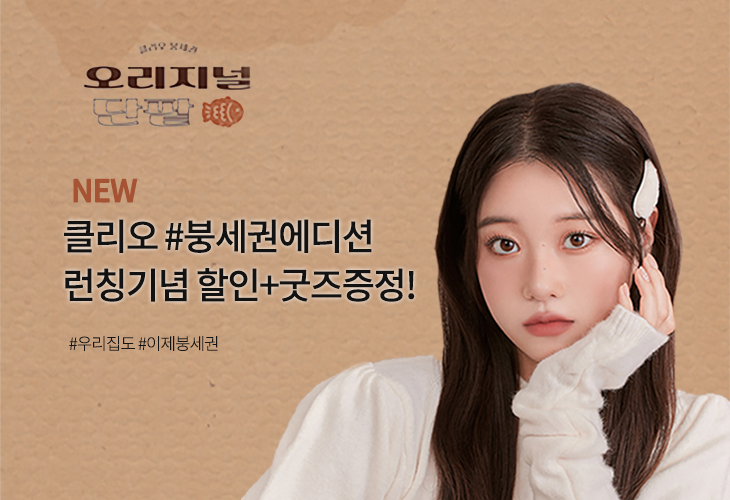
<style>
.page{position:relative;width:730px;height:500px}
.page>*{position:absolute;margin:0}
.t1{font:30.5px "NotoSansKR-Medium";letter-spacing:-0.05em;color:#a65334;font-weight:bold}
.t2{font:36.6px/48.8px "NotoSansKR-Medium";letter-spacing:-0.05em;color:#121212}
.t3{font:16.8px "NotoSansKR-Light";letter-spacing:-0.05em;color:#151515}
</style>
<div class="page">
<p class="t1" style="left:73px;top:178px;width:65px;height:25px">NEW</p>
<p class="t2" style="left:64px;top:219px;width:351px;height:83px">클리오 #붕세권에디션<br>런칭기념 할인+굿즈증정!</p>
<p class="t3" style="left:69px;top:336px;width:149px;height:15px">#우리집도 #이제붕세권</p>
</div>
